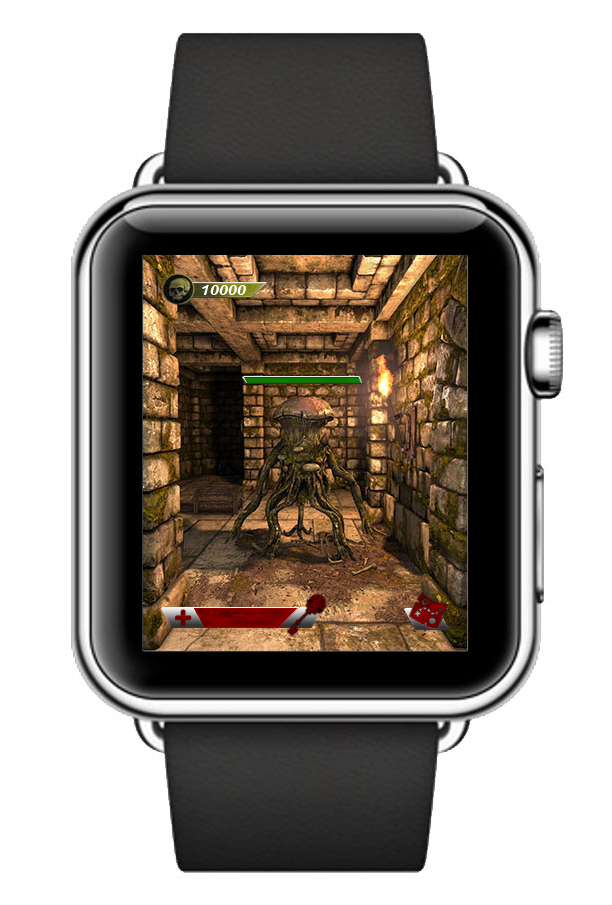
<style>
.page{position:relative;width:612px;height:905px;background:#ffffff}
.page>*{position:absolute;margin:0}
.t1{font:13.2px "Arial-BoldItalicMT";color:#ffffff;scale:1.23 1}
</style>
<div class="page">
<p class="t1" style="left:202px;top:285px;width:44px;height:10px">10000</p>
</div>
